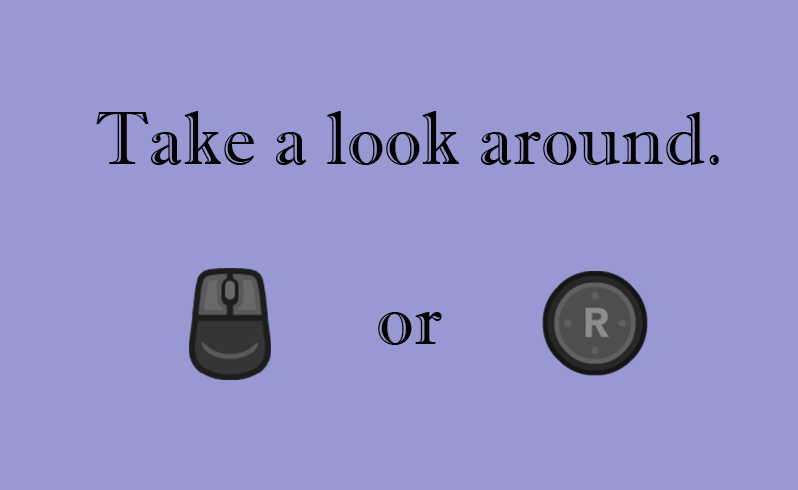
<style>
.page{position:relative;width:798px;height:490px;background:#9898d3}
.page>*{position:absolute;margin:0}
.t1{font:74.8px "ImprintMT-Shadow";color:#030303}
</style>
<div class="page">
<p class="t1" style="left:96px;top:111px;width:623px;height:234px;text-align:center">Take a look around.<br><br>or</p>
</div>
